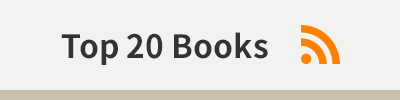
<style>
.page{position:relative;width:400px;height:100px;background:#f2f2f0}
.page>*{position:absolute;margin:0}
.t1{font:32px "NotoSansCJKkr-Bold";color:#333333}
</style>
<div class="page">
<p class="t1" style="left:61px;top:32px;width:207px;height:33px">Top 20 Books</p>
</div>
